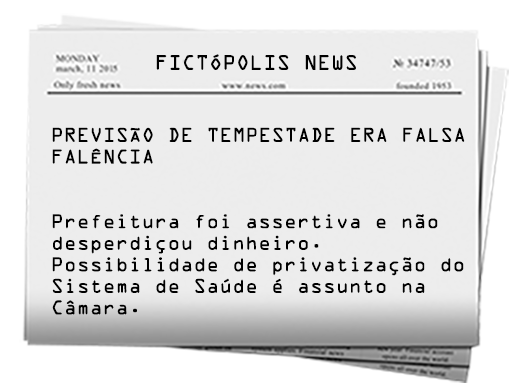
<style>
.page{position:relative;width:512px;height:387px;background:#ededed}
.page>*{position:absolute;margin:0}
.t1{font:18.8px "OCRAStd";color:#000000}
.t2{font:18px "OCRAStd";color:#000000}
</style>
<div class="page">
<p class="t1" style="left:156px;top:54px;width:200px;height:16px">FICTÓPOLIS NEWS</p>
<p class="t2" style="left:52px;top:127px;width:413px;height:188px">PREVISÃO DE TEMPESTADE ERA FALSA <br>FALÊNCIA<br><br><br>Prefeitura foi assertiva e não <br>desperdiçou dinheiro. <br>Possibilidade de privatização do<br>Sistema de Saúde é assunto na <br>Câmara.</p>
</div>
